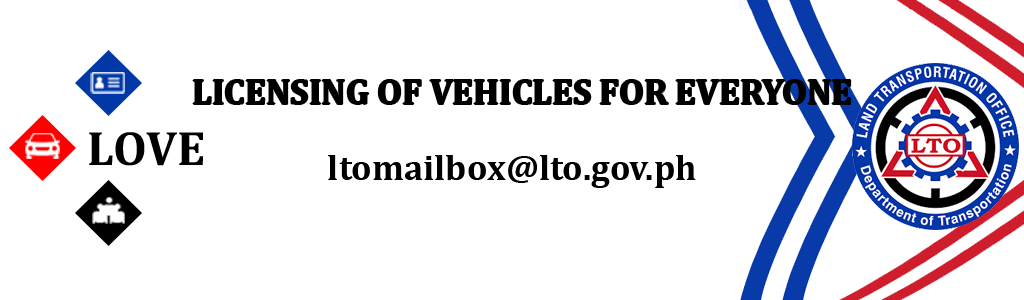
<style>
.page{position:relative;width:1024px;height:300px;background:#ffffff}
.page>*{position:absolute;margin:0}
.t1{font:36px "Cambria-Bold";color:#000000}
.t2{font:48.7px "Cambria-Bold";color:#000000}
</style>
<div class="page">
<p class="t1" style="left:193px;top:80px;width:658px;height:24px">LICENSING OF VEHICLES FOR EVERYONE</p>
<p class="t2" style="left:89px;top:132px;width:115px;height:34px">LOVE</p>
<p class="t1" style="left:328px;top:155px;width:368px;height:33px">ltomailbox@lto.gov.ph</p>
</div>
